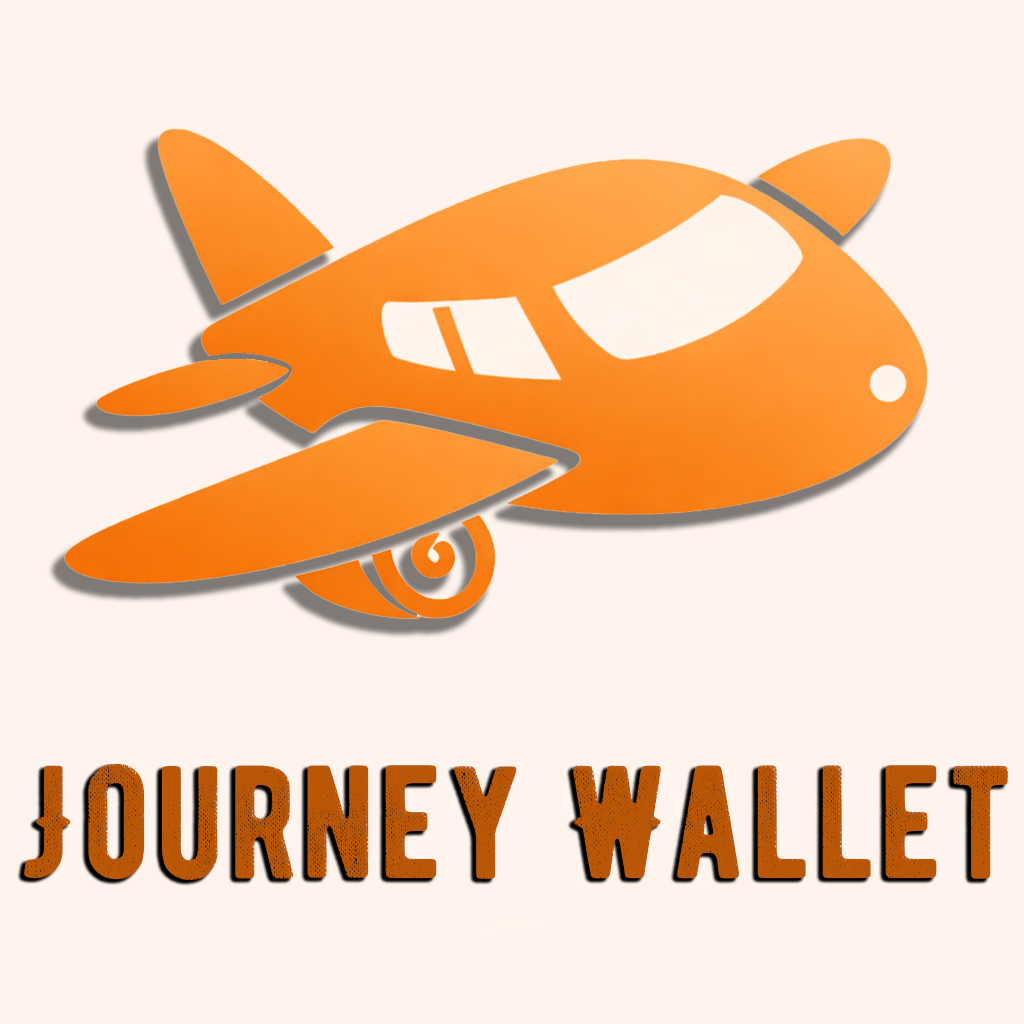
<style>
.page{position:relative;width:1024px;height:1024px;background:#fef4ed}
.page>*{position:absolute;margin:0}
.t1{font:160px "BERNIERDistressed-Regular";letter-spacing:0.025em;color:#b95707}
</style>
<div class="page">
<p class="t1" style="left:24px;top:763px;width:984px;height:117px">Journey Wallet</p>
</div>
